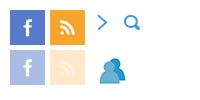
<style>
.page{position:relative;width:200px;height:100px;background:#ffffff}
.page>*{position:absolute;margin:0}
.t1{font:20.9px "LetterGothicStd-BoldSlanted";color:#3498db;text-transform:uppercase;scale:1.05 1}
</style>
<div class="page">
<p class="t1" style="left:97px;top:14px;width:11px;height:16px">&gt;</p>
</div>
